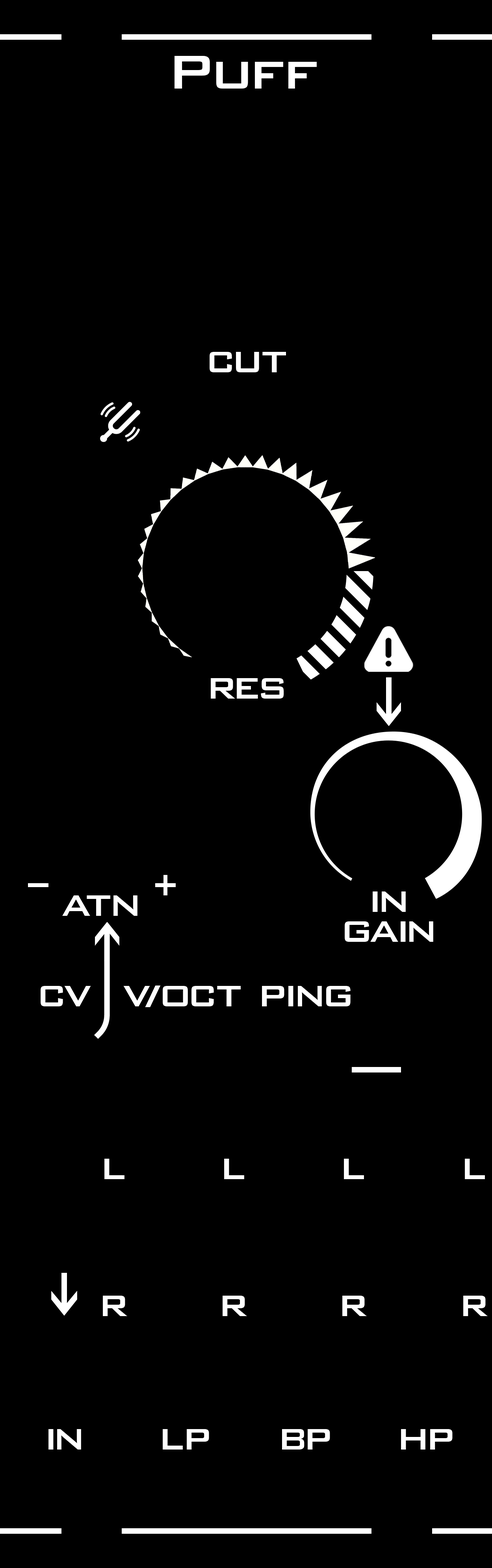
<style>
.page{position:relative;width:492px;height:1568px;background:#000000}
.page>*{position:absolute;margin:0}
.t1{font:63px "BankGothicBT-Medium";letter-spacing:-0.04em;color:#ffffff}
.t2{font:63px "BankGothicBT-Medium";letter-spacing:-0.08em;color:#ffffff}
.t3{font:63px "BankGothicBT-Medium";letter-spacing:-0.02em;color:#ffffff}
.t4{font:39.4px "BankGothicBT-Medium";letter-spacing:-0.14em;color:#ffffff}
.t5{font:39.4px "BankGothicBT-Medium";letter-spacing:-0.06em;color:#ffffff}
.t6{font:39.4px "BankGothicBT-Medium";letter-spacing:-0.1em;color:#ffffff}
.t7{font:39.4px "BankGothicBT-Medium";letter-spacing:-0.12em;color:#ffffff}
.t8{font:39.4px/29.9px "BankGothicBT-Medium";letter-spacing:-0.1em;color:#ffffff}
.t9{font:39.4px/29.9px "BankGothicBT-Medium";letter-spacing:-0.16em;color:#ffffff}
.t10{font:39.4px "BankGothicBT-Medium";letter-spacing:-0.065em;color:#ffffff}
.t11{font:39.4px "BankGothicBT-Medium";letter-spacing:-0.08em;color:#ffffff}
.t12{font:39.4px "BankGothicBT-Medium";letter-spacing:-0.04em;color:#ffffff}
.t13{font:39.4px "BankGothicBT-Medium";letter-spacing:-0.22em;color:#ffffff}
.t14{font:39.4px "BankGothicBT-Medium";letter-spacing:-0.16em;color:#ffffff}
</style>
<div class="page">
<p class="t1" style="left:174px;top:56px;width:142px;height:33px">P<span class="t2">u</span><span class="t3">f</span><span class="t2">f</span></p>
<p class="t4" style="left:209px;top:352px;width:77px;height:20px">C<span class="t5">U</span><span class="t6">T</span></p>
<p class="t4" style="left:211px;top:678px;width:73px;height:21px">R<span class="t7">E</span>S</p>
<p class="t8" style="left:344px;top:891px;width:89px;height:51px;text-align:center"><span class="t9">I</span>N<br>GA<span class="t9">I</span>N</p>
<p class="t5" style="left:62px;top:895px;width:75px;height:21px">A<span class="t10">T</span>N</p>
<p class="t11" style="left:41px;top:986px;width:50px;height:20px">C<span class="t12">V</span></p>
<p class="t12" style="left:123px;top:986px;width:117px;height:21px"><span class="t6">V</span><span class="t13">/</span>/<span class="t4">O</span>CT</p>
<p class="t4" style="left:262px;top:986px;width:88px;height:20px"><span class="t11">P</span>IN<span class="t11">G</span></p>
<p class="t4" style="left:104px;top:1159px;width:20px;height:20px">L</p>
<p class="t4" style="left:224px;top:1159px;width:20px;height:20px">L</p>
<p class="t4" style="left:344px;top:1159px;width:20px;height:20px">L</p>
<p class="t4" style="left:464px;top:1159px;width:20px;height:20px">L</p>
<p class="t4" style="left:103px;top:1296px;width:24px;height:20px">R</p>
<p class="t4" style="left:222px;top:1296px;width:25px;height:20px">R</p>
<p class="t4" style="left:342px;top:1296px;width:24px;height:20px">R</p>
<p class="t4" style="left:463px;top:1296px;width:24px;height:20px">R</p>
<p class="t14" style="left:48px;top:1429px;width:33px;height:21px">I<span class="t4">N</span></p>
<p class="t11" style="left:163px;top:1429px;width:46px;height:21px">L<span class="t4">P</span></p>
<p class="t4" style="left:282px;top:1429px;width:48px;height:21px">BP</p>
<p class="t4" style="left:401px;top:1429px;width:51px;height:21px">HP</p>
</div>
